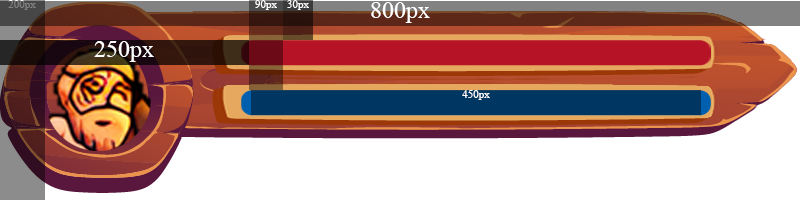
<style>
.page{position:relative;width:800px;height:200px;background:#ffffff}
.page>*{position:absolute;margin:0}
.t1{font:11px "TimesNewRomanPSMT";color:#828282}
.t2{font:11px "TimesNewRomanPSMT";color:#ffffff}
.t3{font:24px "TimesNewRomanPSMT";color:#ffffff}
</style>
<div class="page">
<p class="t1" style="left:8px;top:0px;width:28px;height:10px">200px</p>
<p class="t2" style="left:255px;top:0px;width:22px;height:10px">90px</p>
<p class="t2" style="left:287px;top:0px;width:22px;height:10px">30px</p>
<p class="t3" style="left:371px;top:2px;width:59px;height:21px">800px</p>
<p class="t3" style="left:94px;top:41px;width:60px;height:21px">250px</p>
<p class="t2" style="left:462px;top:90px;width:28px;height:10px">450px</p>
</div>
